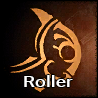
<style>
.page{position:relative;width:98px;height:98px}
.page>*{position:absolute;margin:0}
.t1{font:16px "Roboto-Medium";color:#ffffff;scale:1.2 1}
</style>
<div class="page">
<p class="t1" style="left:24px;top:75px;width:49px;height:12px">Roller</p>
</div>
